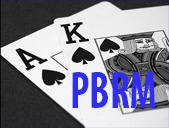
<style>
.page{position:relative;width:169px;height:128px}
.page>*{position:absolute;margin:0}
.t1{font:52.3px "MyriadPro-BoldCond";color:#2e2ef7;scale:0.81 1}
</style>
<div class="page">
<p class="t1" style="left:72px;top:72px;width:83px;height:36px">PBRM</p>
</div>
